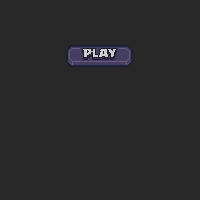
<style>
.page{position:relative;width:200px;height:200px;background:#282828}
.page>*{position:absolute;margin:0}
.t1{font:9.3px "Supercell-Magic"}
.t2{font:9.3px "Supercell-Magic";color:#cccccc}
</style>
<div class="page">
<p class="t1" style="left:83px;top:51px;width:33px;height:8px">PLAY</p>
<p class="t2" style="left:83px;top:49px;width:33px;height:8px">PLAY</p>
</div>
